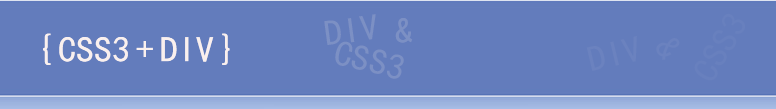
<style>
.page{position:relative;width:776px;height:109px;background:#637cbc}
.page>*{position:absolute;margin:0}
.t1{font:36px "SimHei";color:#7c90c4}
.t2{font:36px "SimHei";color:#faf0ee}
.t3{font:36px "SimHei";color:#6b82bf}
</style>
<div class="page">
<p class="t1" style="left:324px;top:14px;width:52px;height:31px;rotate:-8deg">DIV</p>
<p class="t1" style="left:395px;top:18px;width:18px;height:25px">&amp;</p>
<p class="t2" style="left:43px;top:33px;width:8px;height:32px">{</p>
<p class="t2" style="left:59px;top:37px;width:155px;height:25px">CSS3 + DIV</p>
<p class="t2" style="left:222px;top:33px;width:8px;height:32px">}</p>
<p class="t1" style="left:335px;top:41px;width:69px;height:38px;rotate:13deg">CSS3</p>
<p class="t3" style="left:586px;top:36px;width:51px;height:35px;rotate:-13deg">DIV</p>
<p class="t3" style="left:656px;top:38px;width:24px;height:22px;rotate:57deg">&amp;</p>
</div>
